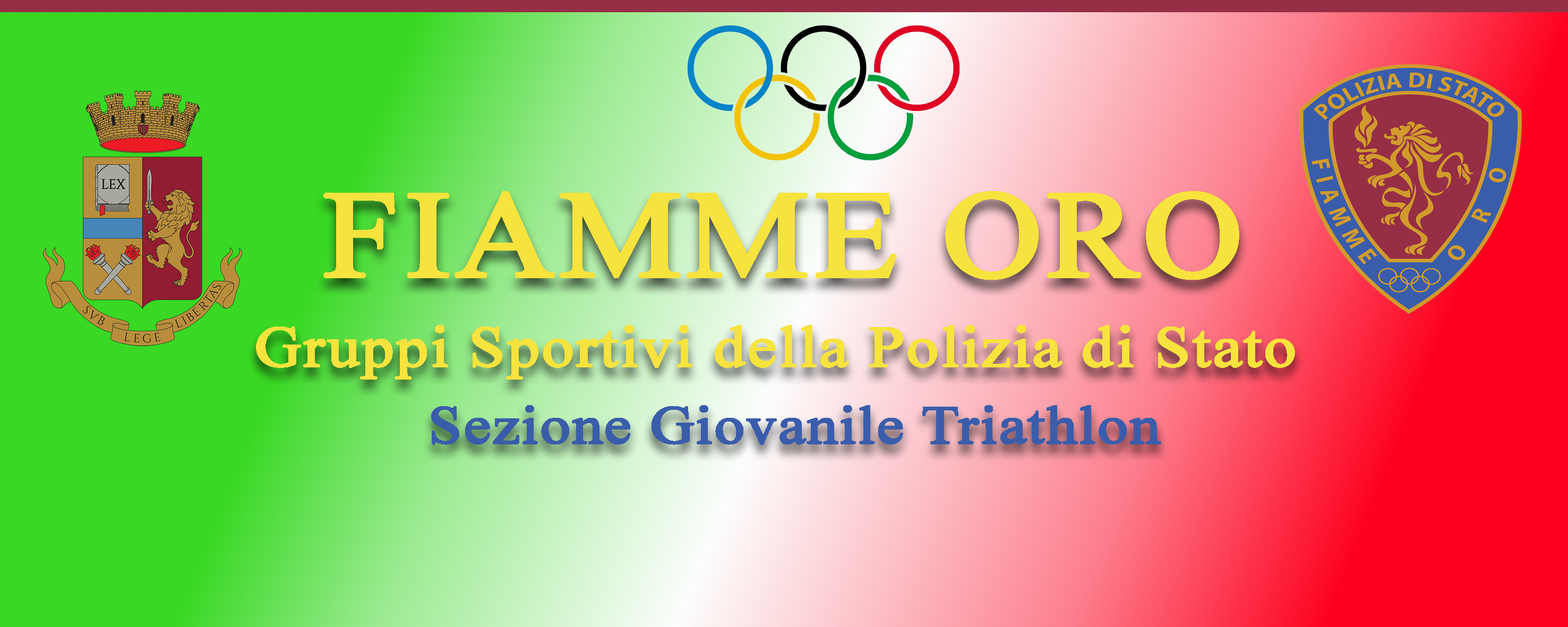
<style>
.page{position:relative;width:1568px;height:627px}
.page>*{position:absolute;margin:0}
.t1{font:123.5px "TimesNewRomanPSMT";letter-spacing:0.01em;color:#f7e33d;font-weight:bold;scale:1.11 1}
.t2{font:57.7px "TimesNewRomanPSMT";letter-spacing:0.01em;color:#f7e33d;font-weight:bold;scale:1.11 1}
.t3{font:53.8px "TimesNewRomanPSMT";letter-spacing:0.01em;color:#3a5dab;font-weight:bold;scale:1.11 1}
</style>
<div class="page">
<p class="t1" style="left:323px;top:191px;width:916px;height:89px">FIAMME ORO</p>
<p class="t2" style="left:256px;top:325px;width:1039px;height:55px">Gruppi Sportivi della Polizia di Stato</p>
<p class="t3" style="left:431px;top:405px;width:730px;height:40px">Sezione Giovanile Triathlon</p>
</div>
